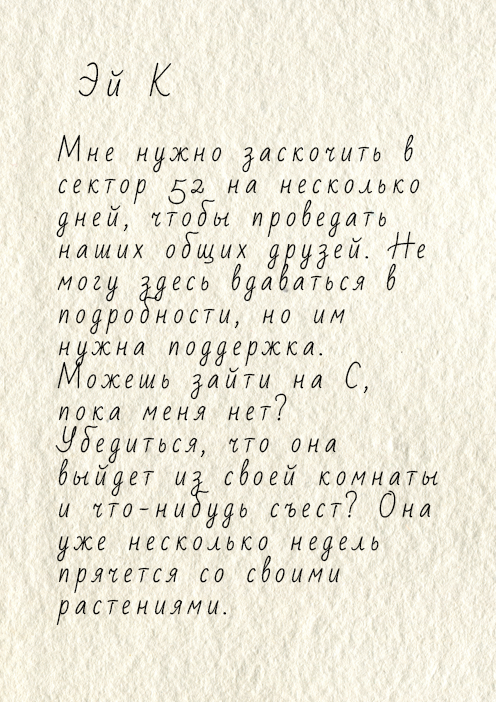
<style>
.page{position:relative;width:496px;height:702px}
.page>*{position:absolute;margin:0}
.t1{font:27px "BadScript-Regular";letter-spacing:0.2em;color:#010101}
.t2{font:34px "BadScript-Regular";letter-spacing:0.2em;color:#010101}
</style>
<div class="page">
<p class="t1" style="left:55px;top:62px;width:383px;height:564px;text-align:right"><span class="t2"> Эй К<br></span><br>Мне нужно заскочить в сектор 52 на несколько дней, чтобы проведать наших общих друзей. Не могу здесь вдаваться в подробности, но им нужна поддержка. Можешь зайти на С, пока меня нет? Убедиться, что она выйдет из своей комнаты и что-нибудь съест? Она уже несколько недель прячется со своими растениями.</p>
</div>
